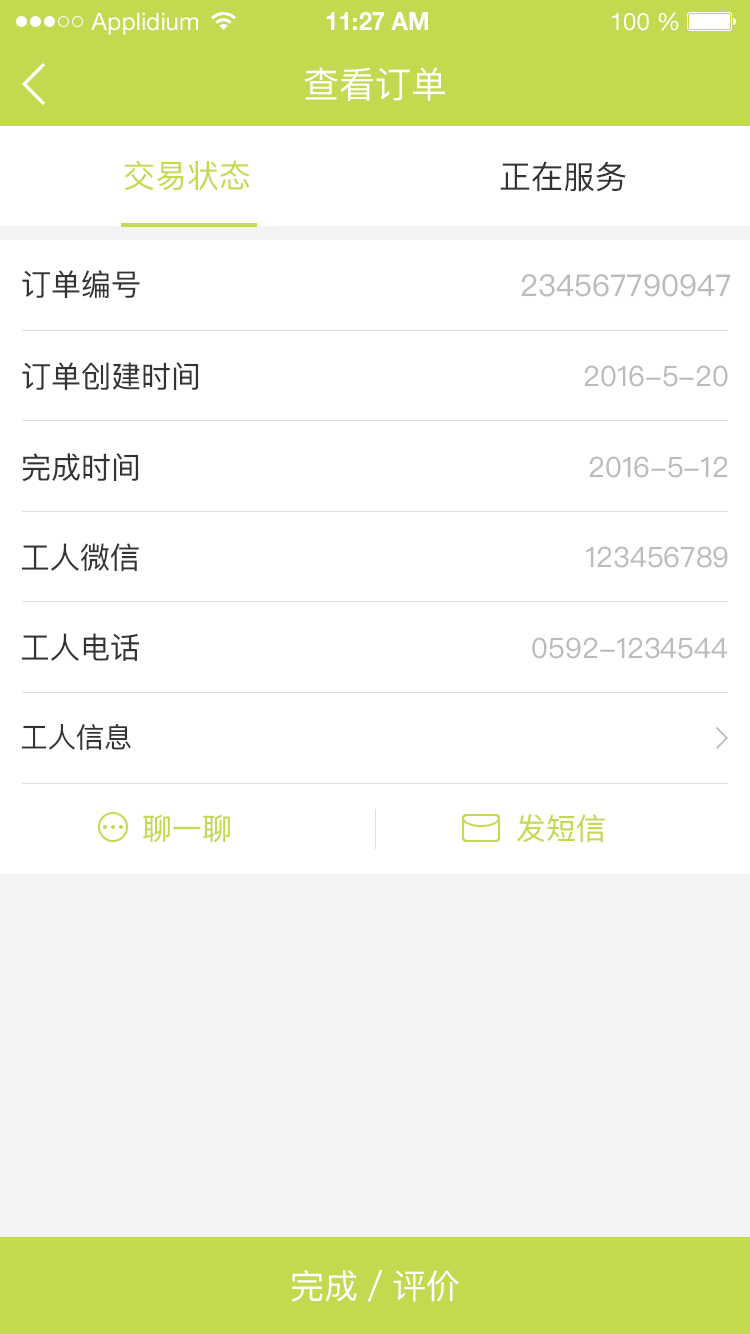
<style>
.page{position:relative;width:750px;height:1334px;background:#ffffff}
.page>*{position:absolute;margin:0}
.t1{font:24px "HelveticaNeueLTStd-Roman";color:#ffffff}
.t2{font:24px "HelveticaNeueLTStd-Bd";color:#ffffff}
.t3{font:36px "PingFangSC-Regular";color:#ffffff}
.t4{font:32px "PingFangSC-Regular";color:#c3d94f}
.t5{font:32px "PingFangSC-Regular";color:#333333}
.t6{font:30px "PingFangSC-Regular";color:#333333}
.t7{font:30px "PingFangSC-Regular";color:#bbbbbb}
.t8{font:28px "PingFangSC-Regular";color:#bbbbbb}
.t9{font:28px "PingFangSC-Regular";color:#333333}
.t10{font:30px "PingFangSC-Regular";color:#c3d94f}
.t11{font:34px "PingFangSC-Regular";color:#ffffff}
</style>
<div class="page">
<p class="t1" style="left:91px;top:12px;width:107px;height:23px">Applidium</p>
<p class="t2" style="left:326px;top:12px;width:102px;height:18px">11:27 AM</p>
<p class="t1" style="left:612px;top:12px;width:67px;height:19px">100 %</p>
<p class="t3" style="left:304px;top:67px;width:141px;height:34px">查看订单</p>
<p class="t4" style="left:124px;top:160px;width:126px;height:31px">交易状态</p>
<p class="t5" style="left:500px;top:161px;width:126px;height:31px">正在服务</p>
<p class="t6" style="left:22px;top:270px;width:118px;height:29px">订单编号</p>
<p class="t7" style="left:521px;top:274px;width:210px;height:23px">234567790947</p>
<p class="t6" style="left:22px;top:362px;width:177px;height:29px">订单创建时间</p>
<p class="t8" style="left:584px;top:365px;width:144px;height:22px">2016-5-20</p>
<p class="t6" style="left:22px;top:453px;width:117px;height:29px">完成时间</p>
<p class="t8" style="left:589px;top:456px;width:139px;height:22px">2016-5-12</p>
<p class="t6" style="left:21px;top:543px;width:118px;height:29px">工人微信</p>
<p class="t8" style="left:586px;top:546px;width:142px;height:22px">123456789</p>
<p class="t6" style="left:21px;top:633px;width:119px;height:28px">工人电话</p>
<p class="t8" style="left:532px;top:637px;width:196px;height:22px">0592-1234544</p>
<p class="t9" style="left:21px;top:724px;width:110px;height:26px">工人信息</p>
<p class="t10" style="left:143px;top:814px;width:87px;height:28px">聊一聊</p>
<p class="t10" style="left:517px;top:814px;width:88px;height:29px">发短信</p>
<p class="t11" style="left:291px;top:1270px;width:168px;height:32px">完成／评价</p>
</div>
